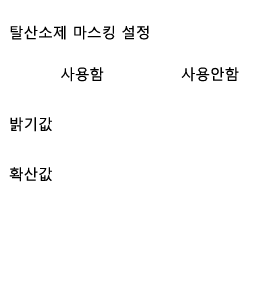
<style>
.page{position:relative;width:279px;height:290px;background:#ffffff}
.page>*{position:absolute;margin:0}
.t1{font:14.6px/41.7px "MalgunGothicRegular";color:#000000}
.t2{font:14.6px/50px "MalgunGothicRegular";color:#000000}
</style>
<div class="page">
<p class="t1" style="left:9px;top:25px;width:230px;height:157px"><span class="t2">탈산소제 마스킹 설정<br></span>          사용함               사용안함<br><span class="t2">밝기값  <br>확산값</span></p>
</div>
